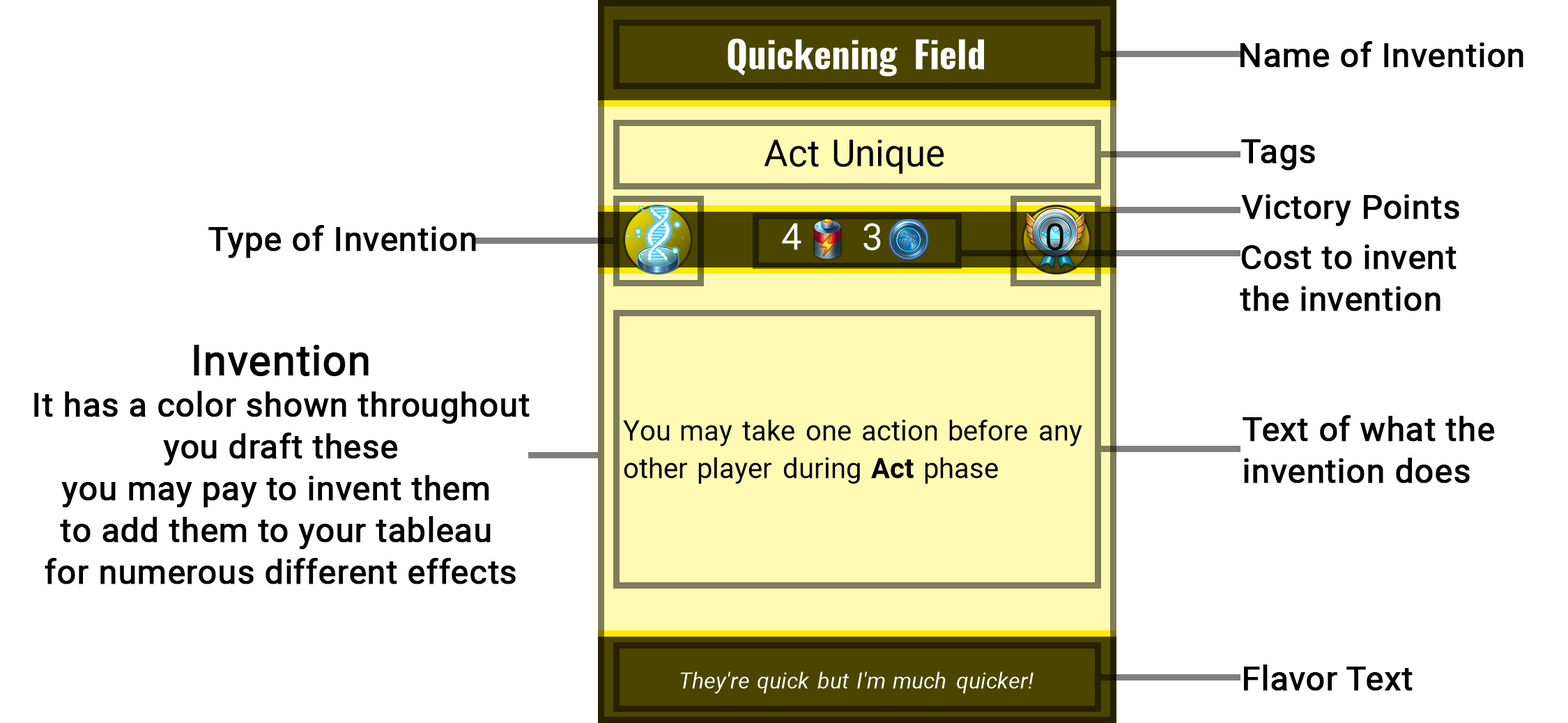
<style>
.page{position:relative;width:1568px;height:723px;background:#ffffff}
.page>*{position:absolute;margin:0}
.t1{font:33.5px "Roboto-Regular";color:#000000;font-weight:bold}
.t2{font:33.5px/41.8px "Roboto-Regular";color:#000000;font-weight:bold}
.t3{font:41.8px/41.8px "Roboto-Regular";color:#000000;font-weight:bold}
</style>
<div class="page">
<p class="t1" style="left:1240px;top:41px;width:283px;height:27px">Name of Invention</p>
<p class="t1" style="left:1241px;top:139px;width:74px;height:32px">Tags</p>
<p class="t1" style="left:1241px;top:194px;width:218px;height:32px">Victory Points</p>
<p class="t1" style="left:208px;top:225px;width:268px;height:34px">Type of Invention</p>
<p class="t2" style="left:1240px;top:245px;width:216px;height:67px">Cost to invent <br>the invention</p>
<p class="t2" style="left:34px;top:345px;width:496px;height:240px;text-align:center"><span class="t3">Invention<br></span>It has a color shown throughout<br>you draft these<br>you may pay to invent them <br>to add them to your tableau <br>for numerous different effects</p>
<p class="t2" style="left:1243px;top:415px;width:252px;height:69px">Text of what the <br>invention does</p>
<p class="t1" style="left:1244px;top:665px;width:169px;height:26px">Flavor Text</p>
</div>
